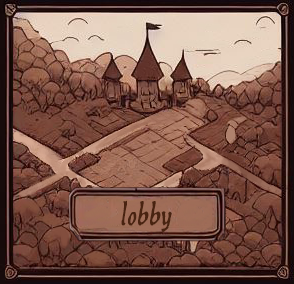
<style>
.page{position:relative;width:294px;height:284px}
.page>*{position:absolute;margin:0}
.t1{font:33.3px "Balthazar";color:#492310;scale:0.85 1}
</style>
<div class="page">
<p class="t1" style="left:121px;top:200px;width:51px;height:32px">lobby</p>
</div>
